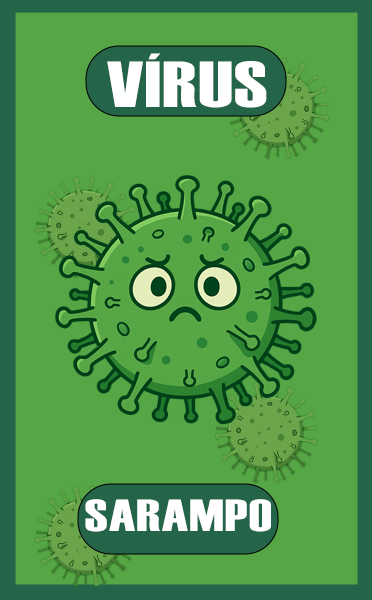
<style>
.page{position:relative;width:372px;height:600px;background:#56a645}
.page>*{position:absolute;margin:0}
.t1{font:65px "Haettenschweiler";letter-spacing:0.015em;color:#ffffff;scale:1.35 1}
.t2{font:45px "Haettenschweiler";letter-spacing:0.015em;color:#ffffff;scale:1.35 1}
</style>
<div class="page">
<p class="t1" style="left:107px;top:53px;width:160px;height:55px">VÍRUS</p>
<p class="t2" style="left:85px;top:499px;width:186px;height:33px">SARAMPO</p>
</div>
